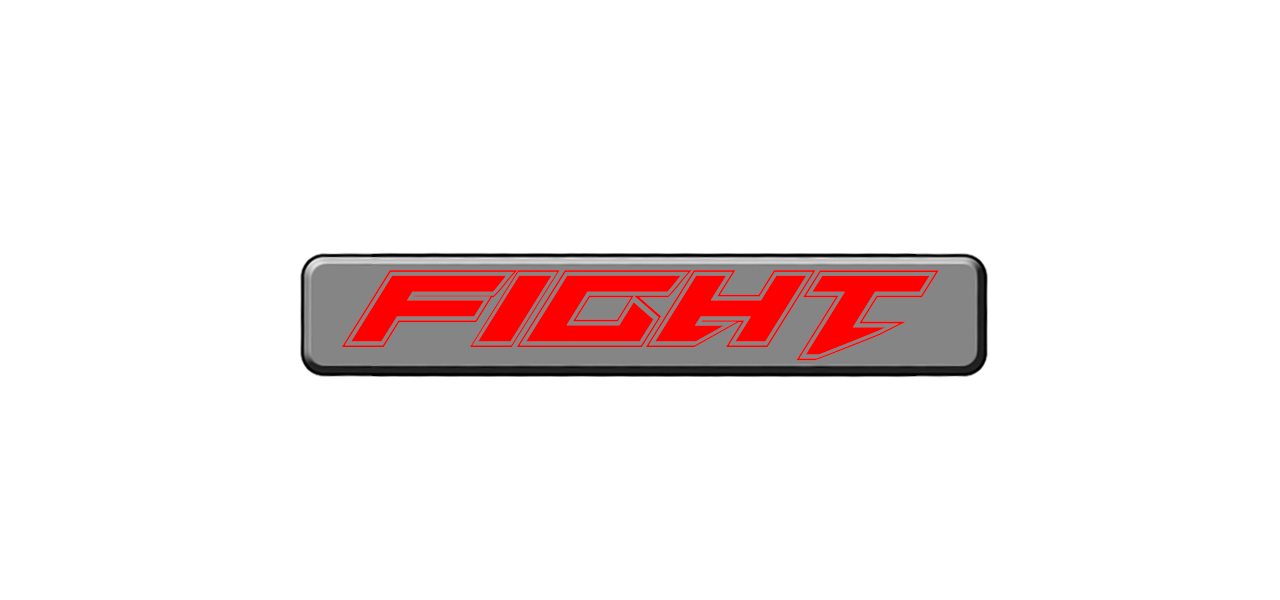
<style>
.page{position:relative;width:1280px;height:600px;background:#ffffff}
.page>*{position:absolute;margin:0}
.t1{font:145.1px "TarrgetAcademyItalic";color:#ff0000}
</style>
<div class="page">
<p class="t1" style="left:341px;top:270px;width:598px;height:91px">fight</p>
</div>
